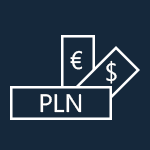
<style>
.page{position:relative;width:150px;height:150px;background:#15283b}
.page>*{position:absolute;margin:0}
.t1{font:25.4px "SegoeUI";color:#ffffff}
</style>
<div class="page">
<p class="t1" style="left:70px;top:50px;width:13px;height:20px">€</p>
<p class="t1" style="left:106px;top:60px;width:11px;height:24px">$</p>
<p class="t1" style="left:40px;top:94px;width:42px;height:19px">PLN</p>
</div>
